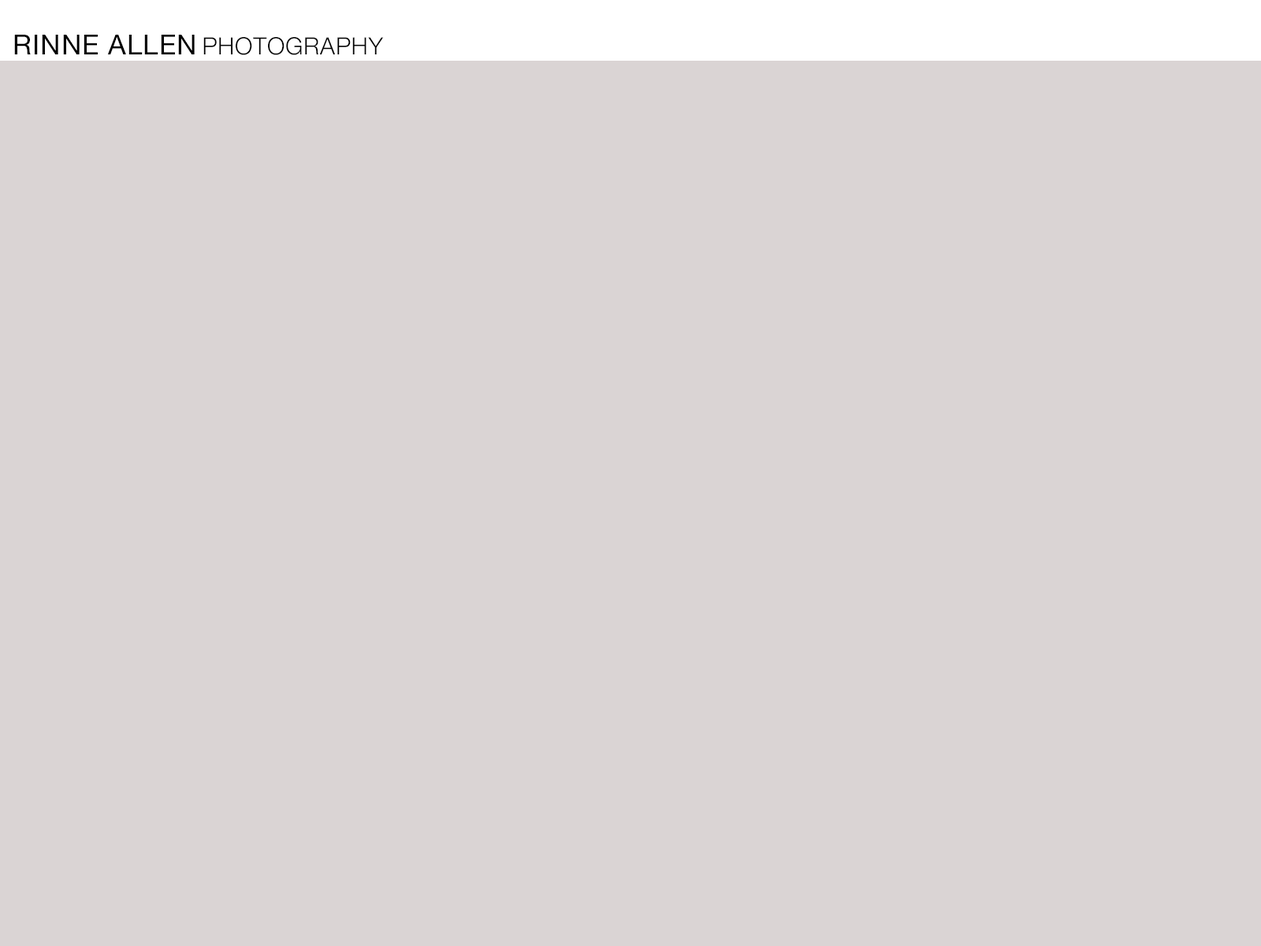
<style>
.page{position:relative;width:1261px;height:946px;background:#dad4d4}
.page>*{position:absolute;margin:0}
.t1{font:27.6px "HelveticaNeue";letter-spacing:0.03em;color:#000000;text-transform:uppercase}
.t2{font:23.6px "HelveticaNeue-Light";letter-spacing:0.03em;color:#000000;text-transform:uppercase}
</style>
<div class="page">
<p class="t1" style="left:14px;top:35px;width:181px;height:19px">RINNE ALLEN</p>
<p class="t2" style="left:203px;top:37px;width:181px;height:18px">PHOTOGRAPHY</p>
</div>
